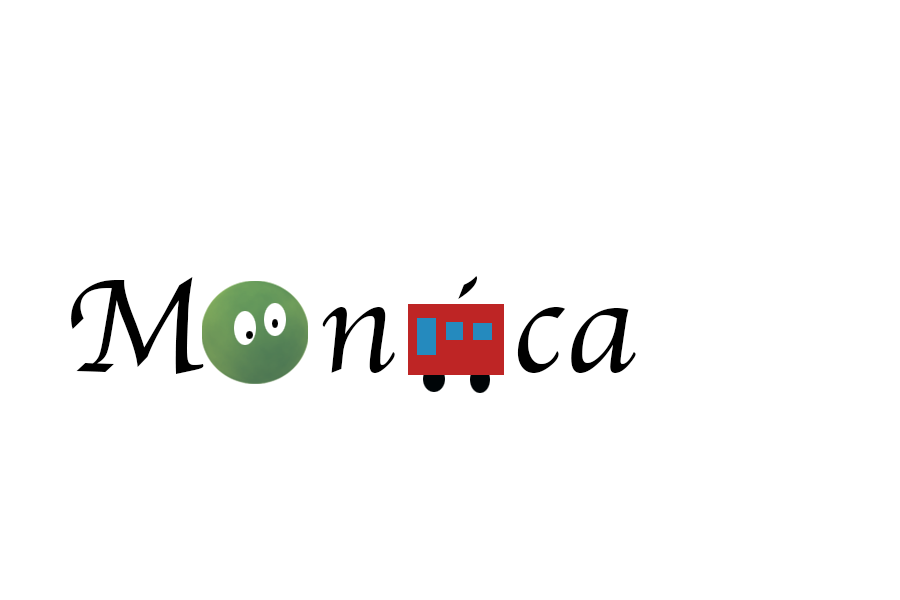
<style>
.page{position:relative;width:900px;height:600px;background:#ffffff}
.page>*{position:absolute;margin:0}
.t1{font:138.3px "Apple-Chancery";color:#000000}
</style>
<div class="page">
<p class="t1" style="left:71px;top:276px;width:565px;height:98px">M   n i ca</p>
</div>
